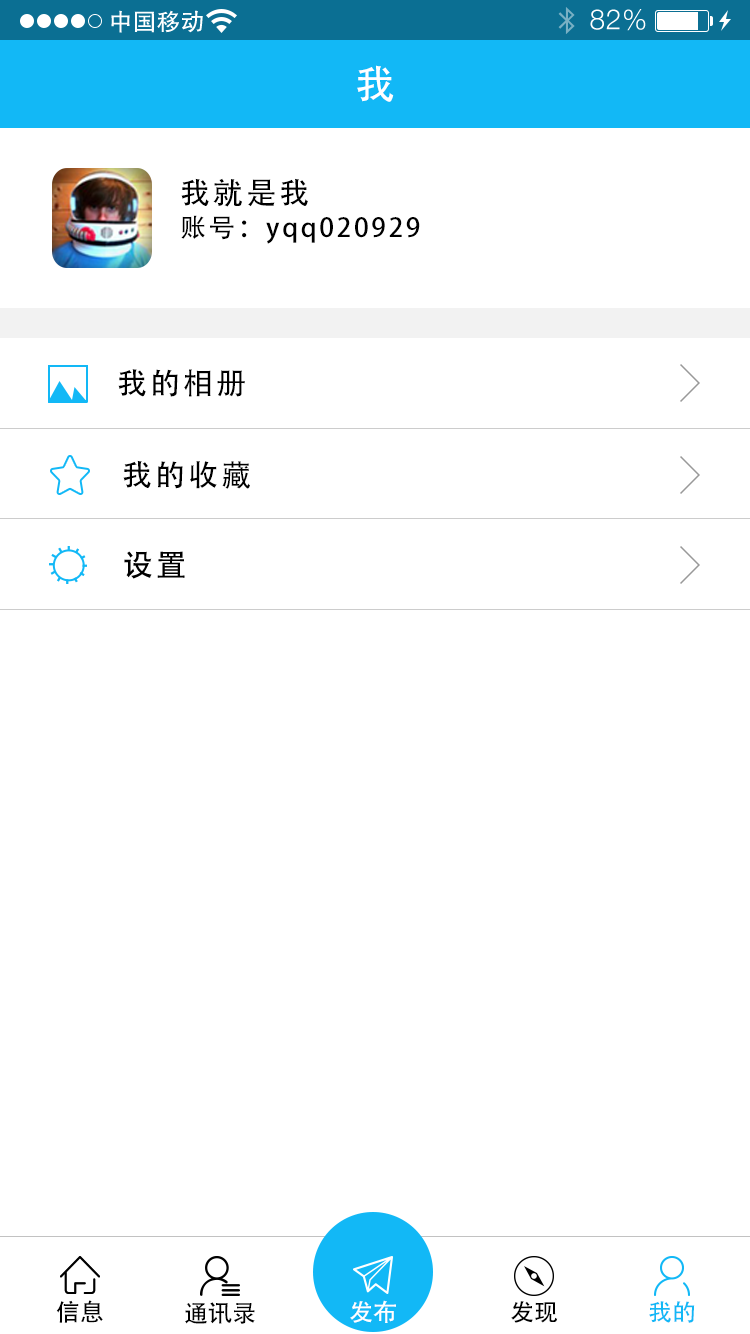
<style>
.page{position:relative;width:750px;height:1334px;background:#ffffff}
.page>*{position:absolute;margin:0}
.t1{font:40px "AdobeHeitiStd-Regular";color:#ffffff}
.t2{font:30px "AdobeHeitiStd-Regular";letter-spacing:0.104em;color:#000000}
.t3{font:26px "AdobeHeitiStd-Regular";letter-spacing:0.104em;color:#000000}
.t4{font:24px "AdobeHeitiStd-Regular";color:#000000}
.t5{font:24px "AdobeHeitiStd-Regular";color:#ffffff}
.t6{font:24px "AdobeHeitiStd-Regular";color:#12b8f6}
</style>
<div class="page">
<p class="t1" style="left:357px;top:65px;width:37px;height:37px">我</p>
<p class="t2" style="left:181px;top:178px;width:127px;height:29px">我就是我</p>
<p class="t3" style="left:181px;top:215px;width:239px;height:29px">账号：yqq020929</p>
<p class="t2" style="left:118px;top:369px;width:127px;height:28px">我的相册</p>
<p class="t2" style="left:123px;top:460px;width:127px;height:29px">我的收藏</p>
<p class="t2" style="left:124px;top:551px;width:61px;height:28px">设置</p>
<p class="t4" style="left:56px;top:1300px;width:47px;height:23px">信息</p>
<p class="t4" style="left:185px;top:1302px;width:70px;height:22px">通讯录</p>
<p class="t5" style="left:350px;top:1300px;width:46px;height:23px">发布</p>
<p class="t4" style="left:511px;top:1301px;width:47px;height:22px">发现</p>
<p class="t6" style="left:649px;top:1301px;width:46px;height:22px">我的</p>
</div>
